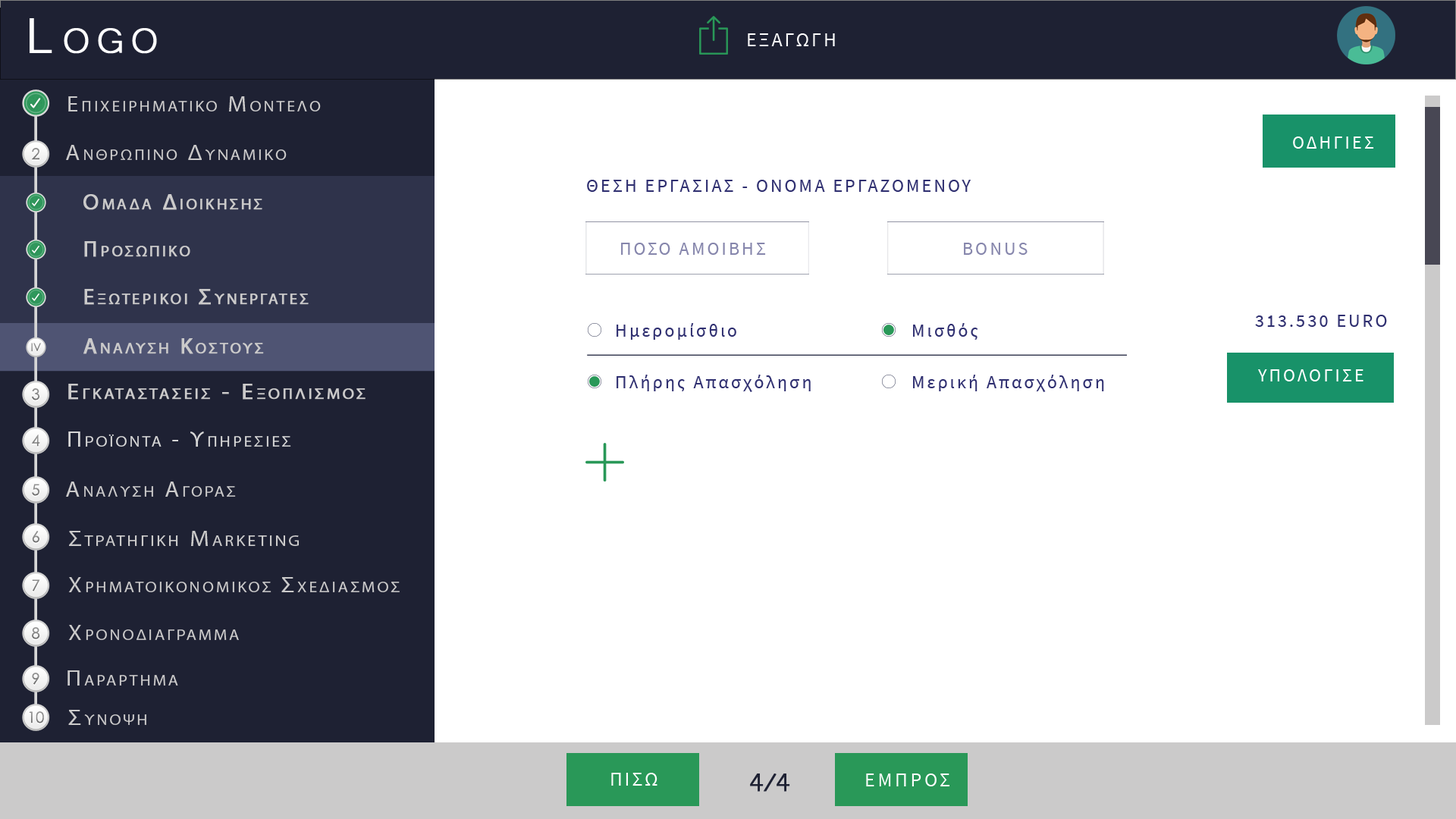
<style>
.page{position:relative;width:1456px;height:819px;background:#ffffff}
.page>*{position:absolute;margin:0}
.t1{font:63.7px "Microsoft-Yi-Baiti";letter-spacing:0.13em;color:#ffffff;font-variant:small-caps;font-weight:bold}
.t2{font:20px "SourceSansPro-Regular";letter-spacing:0.1em;color:#fefefe;text-transform:uppercase}
.t3{font:21.7px "MyriadPro-Regular";letter-spacing:0.13em;color:#cbcaca;font-variant:small-caps;scale:1.09 1}
.t4{font:23.4px "Microsoft-Yi-Baiti";letter-spacing:0.13em;color:#cbcaca;font-variant:small-caps;font-weight:bold}
.t5{font:18.2px "SourceSansPro-Regular";letter-spacing:0.13em;color:#ffffff;text-transform:uppercase}
.t6{font:15.3px "CenturyGothic";color:#7d7d7d}
.t7{font:18.2px "SourceSansPro-Regular";letter-spacing:0.13em;color:#2f2f70;text-transform:uppercase}
.t8{font:22.3px "MyriadPro-Regular";letter-spacing:0.13em;color:#cbcaca;font-variant:small-caps;font-weight:bold}
.t9{font:18.2px "SourceSansPro-Regular";letter-spacing:0.13em;color:#8686ac;text-transform:uppercase}
.t10{font:18.2px "SourceSansPro-Regular";letter-spacing:0.13em;color:#2f2f70}
.t11{font:11.2px "CenturyGothic";color:#818181}
.t12{font:15.3px "CenturyGothic";color:#8b8b8b}
.t13{font:21.7px/91px "MyriadPro-Regular";letter-spacing:0.13em;color:#cbcaca;font-variant:small-caps;font-weight:bold;scale:1.09 1}
.t14{font:23.4px/91px "Microsoft-Yi-Baiti";letter-spacing:0.13em;color:#cbcaca;font-variant:small-caps;font-weight:bold}
.t15{font:15.3px "CenturyGothic";color:#878787}
.t16{font:21.7px "MyriadPro-Regular";letter-spacing:0.13em;color:#d6d6d6;font-variant:small-caps;scale:1.09 1}
.t17{font:23.4px "Microsoft-Yi-Baiti";letter-spacing:0.13em;color:#d6d6d6;font-variant:small-caps;font-weight:bold}
.t18{font:15.3px "CenturyGothic";color:#898989}
.t19{font:15.3px "CenturyGothic";color:#838383}
.t20{font:22.2px "MyriadPro-Regular";letter-spacing:0.13em;color:#cbcaca;font-variant:small-caps;scale:1.09 1}
.t21{font:25.5px "Microsoft-Yi-Baiti";letter-spacing:0.13em;color:#cbcaca;font-variant:small-caps;font-weight:bold}
.t22{font:15.3px "CenturyGothic";color:#888888}
.t23{font:23.7px "Microsoft-Yi-Baiti";letter-spacing:0.13em;color:#cbcaca;font-variant:small-caps;scale:1.09 1}
.t24{font:32.8px "Microsoft-Yi-Baiti";letter-spacing:-0.1em;color:#1e2133;font-weight:bold}
.t25{font:20px "SourceSansPro-Regular";letter-spacing:0.13em;color:#fefefe;text-transform:uppercase}
</style>
<div class="page">
<p class="t1" style="left:30px;top:18px;width:127px;height:36px">Logo</p>
<p class="t2" style="left:748px;top:33px;width:87px;height:13px">εξαγωγη</p>
<p class="t3" style="left:68px;top:96px;width:253px;height:15px"><span class="t4">   </span>Επιχειρηματικο Μοντελο</p>
<p class="t5" style="left:1293px;top:136px;width:81px;height:13px">Οδηγιεσ</p>
<p class="t6" style="left:32px;top:148px;width:7px;height:12px">2</p>
<p class="t3" style="left:66px;top:145px;width:221px;height:15px"><span class="t4">   </span>Ανθρωπινο Δυναμικο</p>
<p class="t7" style="left:587px;top:180px;width:384px;height:12px">Θεση εργασιασ - ονομα εργαζομενου</p>
<p class="t8" style="left:83px;top:194px;width:179px;height:16px">Ομαδα Διοικησησ</p>
<p class="t8" style="left:84px;top:241px;width:106px;height:16px">Προσωπικο</p>
<p class="t9" style="left:621px;top:243px;width:145px;height:12px">ΠΟΣΟ ΑΜΟΙΒΗΣ</p>
<p class="t9" style="left:964px;top:243px;width:64px;height:12px">bonus</p>
<p class="t8" style="left:84px;top:289px;width:225px;height:16px">Εξωτερικοι Συνεργατεσ</p>
<p class="t7" style="left:1255px;top:315px;width:132px;height:12px">313.530 EURO</p>
<p class="t10" style="left:617px;top:323px;width:119px;height:17px">Ημερομίσθιο</p>
<p class="t10" style="left:913px;top:323px;width:65px;height:17px">Μισθός</p>
<p class="t8" style="left:83px;top:338px;width:181px;height:16px">Αναλυση Κοστουσ</p>
<p class="t11" style="left:31px;top:343px;width:10px;height:9px">IV</p>
<p class="t10" style="left:617px;top:375px;width:194px;height:17px">Πλήρης Απασχόληση</p>
<p class="t10" style="left:913px;top:375px;width:191px;height:17px">Μερική Απασχόληση</p>
<p class="t5" style="left:1258px;top:369px;width:105px;height:12px">υπολογισε</p>
<p class="t12" style="left:32px;top:388px;width:7px;height:12px">3</p>
<p class="t13" style="left:68px;top:384px;width:298px;height:16px"><span class="t14">   </span>Εγκαταστασεισ - Εξοπλισμοσ<br><br><span class="t14">Equipment</span></p>
<p class="t15" style="left:32px;top:435px;width:8px;height:12px">4</p>
<p class="t16" style="left:68px;top:431px;width:223px;height:16px"><span class="t17">   </span>Προϊοντα - Υπηρεσιεσ</p>
<p class="t18" style="left:32px;top:484px;width:7px;height:12px">5</p>
<p class="t3" style="left:66px;top:482px;width:170px;height:15px"><span class="t4">   </span>Αναλυση Αγορασ</p>
<p class="t19" style="left:32px;top:531px;width:7px;height:12px">6</p>
<p class="t20" style="left:69px;top:531px;width:230px;height:15px"><span class="t21">   </span>Στρατηγικη Marketing</p>
<p class="t22" style="left:32px;top:579px;width:8px;height:12px">7</p>
<p class="t3" style="left:68px;top:577px;width:332px;height:15px"><span class="t21">   </span>Χρηματοικονομικοσ Σχεδιασμοσ</p>
<p class="t12" style="left:32px;top:627px;width:8px;height:12px">8</p>
<p class="t3" style="left:68px;top:625px;width:171px;height:15px"><span class="t21">   </span>Χρονοδιαγραμμα</p>
<p class="t19" style="left:32px;top:673px;width:7px;height:12px">9</p>
<p class="t3" style="left:67px;top:670px;width:111px;height:16px"><span class="t23">   </span>Παραρτημα</p>
<p class="t15" style="left:29px;top:711px;width:15px;height:12px">10</p>
<p class="t3" style="left:68px;top:710px;width:78px;height:15px"><span class="t23">   </span>Συνοψη</p>
<p class="t2" style="left:611px;top:773px;width:46px;height:13px">Πισω</p>
<p class="t24" style="left:750px;top:773px;width:40px;height:19px">4/4</p>
<p class="t25" style="left:866px;top:773px;width:83px;height:13px">εμπροσ</p>
</div>
